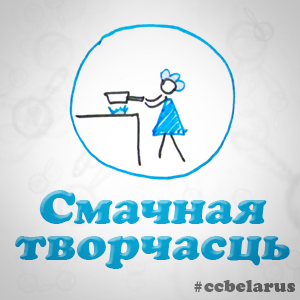
<style>
.page{position:relative;width:300px;height:300px}
.page>*{position:absolute;margin:0}
.t1{font:48px/36px "AGCooperCyrItalic"}
.t2{font:18px "AGCooperCyrRoman";color:#5e5f5f}
</style>
<div class="page">
<p class="t1" style="left:15px;top:190px;width:275px;height:79px;text-align:center">Смачная<br>творчасць</p>
<p class="t2" style="left:194px;top:280px;width:101px;height:12px">#ccbelarus</p>
</div>
